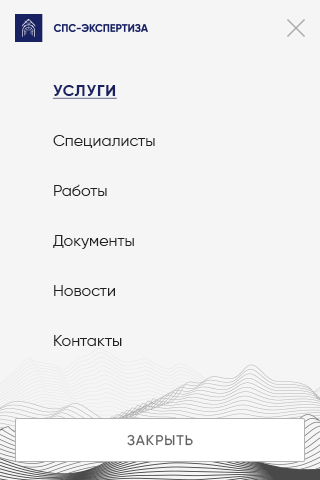
<style>
.page{position:relative;width:320px;height:480px;background:#f5f5f5}
.page>*{position:absolute;margin:0}
.t1{font:16px/50px "Gilroy-Regular";color:#212121}
.t2{font:16px/50px "Gilroy-Bold";letter-spacing:0.05em;color:#182263;text-transform:uppercase;text-decoration:underline}
.t3{font:14px "Gilroy-Medium";letter-spacing:0.075em;color:#616161;text-transform:uppercase}
</style>
<div class="page">
<p class="t1" style="left:52px;top:85px;width:103px;height:261px"><span class="t2">Услуги<br></span>Специалисты<br>Работы<br>Документы<br>Новости<br>Контакты</p>
<p class="t3" style="left:127px;top:434px;width:66px;height:12px">закрыть</p>
</div>
